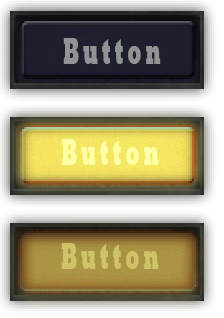
<style>
.page{position:relative;width:224px;height:318px}
.page>*{position:absolute;margin:0}
.t1{font:37.6px "Rockwell-ExtraBold";letter-spacing:0.22em;color:#939295;scale:0.5 1}
.t2{font:37.6px "Rockwell-ExtraBold";letter-spacing:0.22em;color:#ffffa5;scale:0.5 1}
.t3{font:37.6px "Rockwell-ExtraBold";letter-spacing:0.22em;color:#cfc368;scale:0.5 1}
</style>
<div class="page">
<p class="t1" style="left:63px;top:38px;width:98px;height:26px">Button</p>
<p class="t2" style="left:61px;top:139px;width:98px;height:26px">Button</p>
<p class="t3" style="left:61px;top:243px;width:98px;height:26px">Button</p>
</div>
